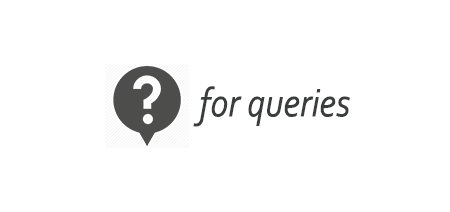
<style>
.page{position:relative;width:450px;height:212px;background:#ffffff}
.page>*{position:absolute;margin:0}
.t1{font:41.8px "Corbel-Italic";color:#3b3c3d;scale:0.87 1}
</style>
<div class="page">
<p class="t1" style="left:193px;top:86px;width:157px;height:41px">for queries</p>
</div>
